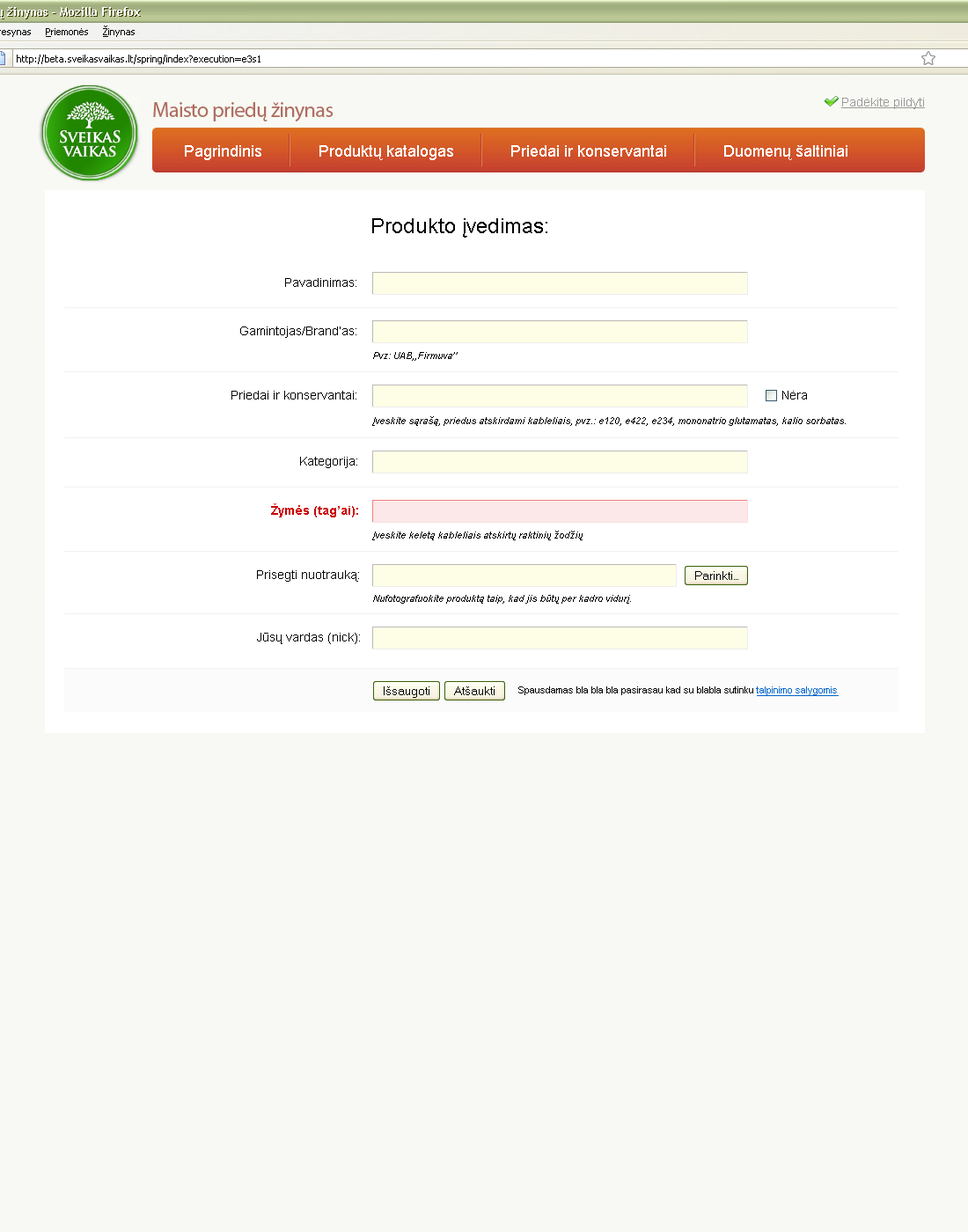
<style>
.page{position:relative;width:968px;height:1232px;background:#f8f9f4}
.page>*{position:absolute;margin:0}
.t1{font:21.1px "ArialMT";color:#000000}
.t2{font:12.3px "ArialMT";color:#000000}
.t3{font:9.7px "Arial-ItalicMT";color:#000000}
.t4{font:12.3px "Arial-BoldMT";color:#cc0000}
.t5{font:9.7px "ArialMT";color:#000000}
.t6{font:9.7px "ArialMT";color:#0066cc;text-decoration:underline}
</style>
<div class="page">
<p class="t1" style="left:372px;top:218px;width:175px;height:20px">Produkto įvedimas:</p>
<p class="t2" style="left:285px;top:278px;width:71px;height:9px">Pavadinimas:</p>
<p class="t2" style="left:240px;top:326px;width:116px;height:12px">Gamintojas/Brand’as:</p>
<p class="t3" style="left:373px;top:352px;width:85px;height:9px">Pvz: UAB,,Firmuva’’</p>
<p class="t2" style="left:231px;top:391px;width:125px;height:8px">Priedai ir konservantai:</p>
<p class="t2" style="left:782px;top:391px;width:25px;height:8px">Nėra</p>
<p class="t3" style="left:372px;top:416px;width:474px;height:10px">Įveskite sąrašą, priedus atskirdami kableliais, pvz.: e120, e422, e234, mononatrio glutamatas, kalio sorbatas.</p>
<p class="t2" style="left:300px;top:457px;width:57px;height:11px">Kategorija:</p>
<p class="t4" style="left:271px;top:503px;width:87px;height:14px">Žymės (tag’ai):</p>
<p class="t3" style="left:372px;top:531px;width:211px;height:9px">Įveskite keletą kableliais atskirtų raktinių žodžių</p>
<p class="t2" style="left:257px;top:570px;width:102px;height:12px">Prisegti nuotrauką:</p>
<p class="t3" style="left:373px;top:595px;width:258px;height:9px">Nufotografuokite produktą taip, kad jis būtų per kadro vidurį.</p>
<p class="t2" style="left:257px;top:633px;width:103px;height:11px">Jūsų vardas (nick):</p>
<p class="t5" style="left:518px;top:686px;width:321px;height:10px">Spausdamas bla bla bla pasirasau kad su blabla sutinku <span class="t6">talpinimo salygomis</span></p>
</div>
